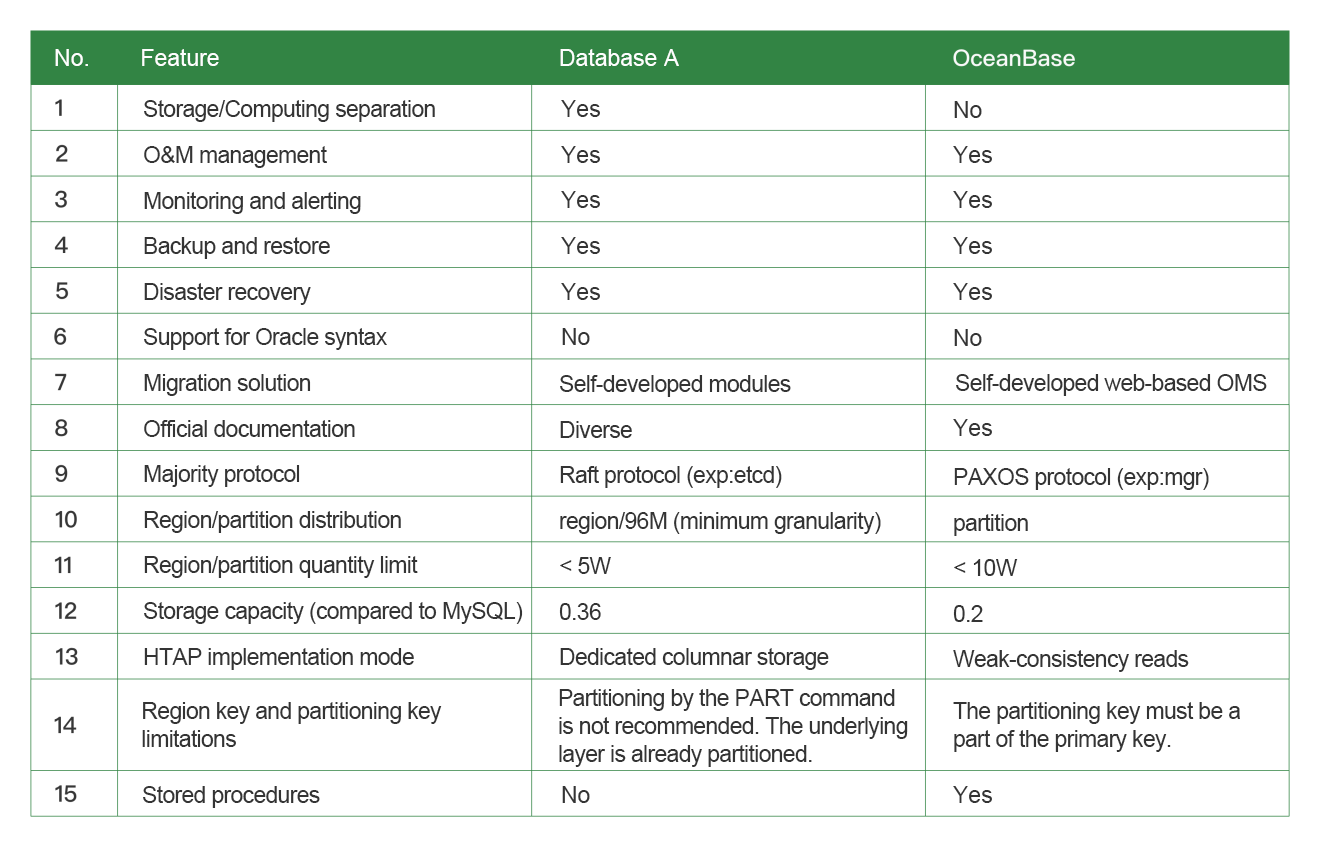
<style>
.page{position:relative;width:1320px;height:844px;background:#ffffff}
.page>*{position:absolute;margin:0}
.t1{font:23px "ArialMT";color:#fefefe}
.t2{font:23px/45.6px "ArialMT";letter-spacing:-0.03em;color:#343434}
.t3{font:23px "ArialMT";color:#343434}
.t4{font:23px/45.5px "ArialMT";letter-spacing:-0.03em;color:#343434}
.t5{font:23px "ArialMT";letter-spacing:-0.03em;color:#343434}
.t6{font:23px/28px "ArialMT";letter-spacing:-0.03em;color:#343434}
</style>
<div class="page">
<p class="t1" style="left:55px;top:49px;width:33px;height:17px">No.</p>
<p class="t1" style="left:142px;top:49px;width:77px;height:17px">Feature</p>
<p class="t1" style="left:560px;top:49px;width:119px;height:17px">Database A</p>
<p class="t2" style="left:144px;top:100px;width:379px;height:570px">Storage/Computing separation<br>O&amp;M management<br>Monitoring and alerting<br>Backup and restore<br>Disaster recovery<br>Support for Oracle syntax<br>Migration solution<br>Official documentation<br>Majority protocol<br>Region/partition distribution<br>Region/partition quantity limit<br>Storage capacity (compared to MySQL)<br>HTAP implementation mode</p>
<p class="t3" style="left:561px;top:100px;width:39px;height:17px">Yes</p>
<p class="t3" style="left:954px;top:101px;width:28px;height:17px">No</p>
<p class="t3" style="left:561px;top:146px;width:39px;height:17px">Yes</p>
<p class="t3" style="left:953px;top:146px;width:39px;height:17px">Yes</p>
<p class="t3" style="left:561px;top:191px;width:39px;height:17px">Yes</p>
<p class="t3" style="left:953px;top:191px;width:39px;height:17px">Yes</p>
<p class="t3" style="left:561px;top:237px;width:39px;height:17px">Yes</p>
<p class="t3" style="left:953px;top:237px;width:39px;height:17px">Yes</p>
<p class="t3" style="left:561px;top:283px;width:39px;height:17px">Yes</p>
<p class="t3" style="left:953px;top:283px;width:39px;height:17px">Yes</p>
<p class="t3" style="left:562px;top:328px;width:28px;height:17px">No</p>
<p class="t3" style="left:954px;top:329px;width:28px;height:17px">No</p>
<p class="t4" style="left:559px;top:375px;width:322px;height:295px">Self-developed modules<br>Diverse<br>Raft protocol (exp:etcd)<br>region/96M (minimum granularity)<br>&lt; 5W<br>0.36<br>Dedicated columnar storage</p>
<p class="t5" style="left:956px;top:374px;width:311px;height:22px">Self-developed web-based OMS</p>
<p class="t3" style="left:953px;top:419px;width:39px;height:17px">Yes</p>
<p class="t4" style="left:953px;top:468px;width:256px;height:204px">PAXOS protocol (exp:mgr)<br>partition<br>&lt; 10W<br>0.2<br>Weak-consistency reads</p>
<p class="t6" style="left:559px;top:689px;width:349px;height:78px">Partitioning by the PART command is not recommended. The underlying layer is already partitioned.</p>
<p class="t6" style="left:142px;top:702px;width:300px;height:45px">Region key and partitioning key limitations</p>
<p class="t6" style="left:953px;top:702px;width:287px;height:50px">The partitioning key must be a part of the primary key.</p>
<p class="t5" style="left:143px;top:786px;width:177px;height:22px">Stored procedures</p>
<p class="t3" style="left:562px;top:786px;width:28px;height:17px">No</p>
<p class="t3" style="left:953px;top:786px;width:39px;height:17px">Yes</p>
</div>
